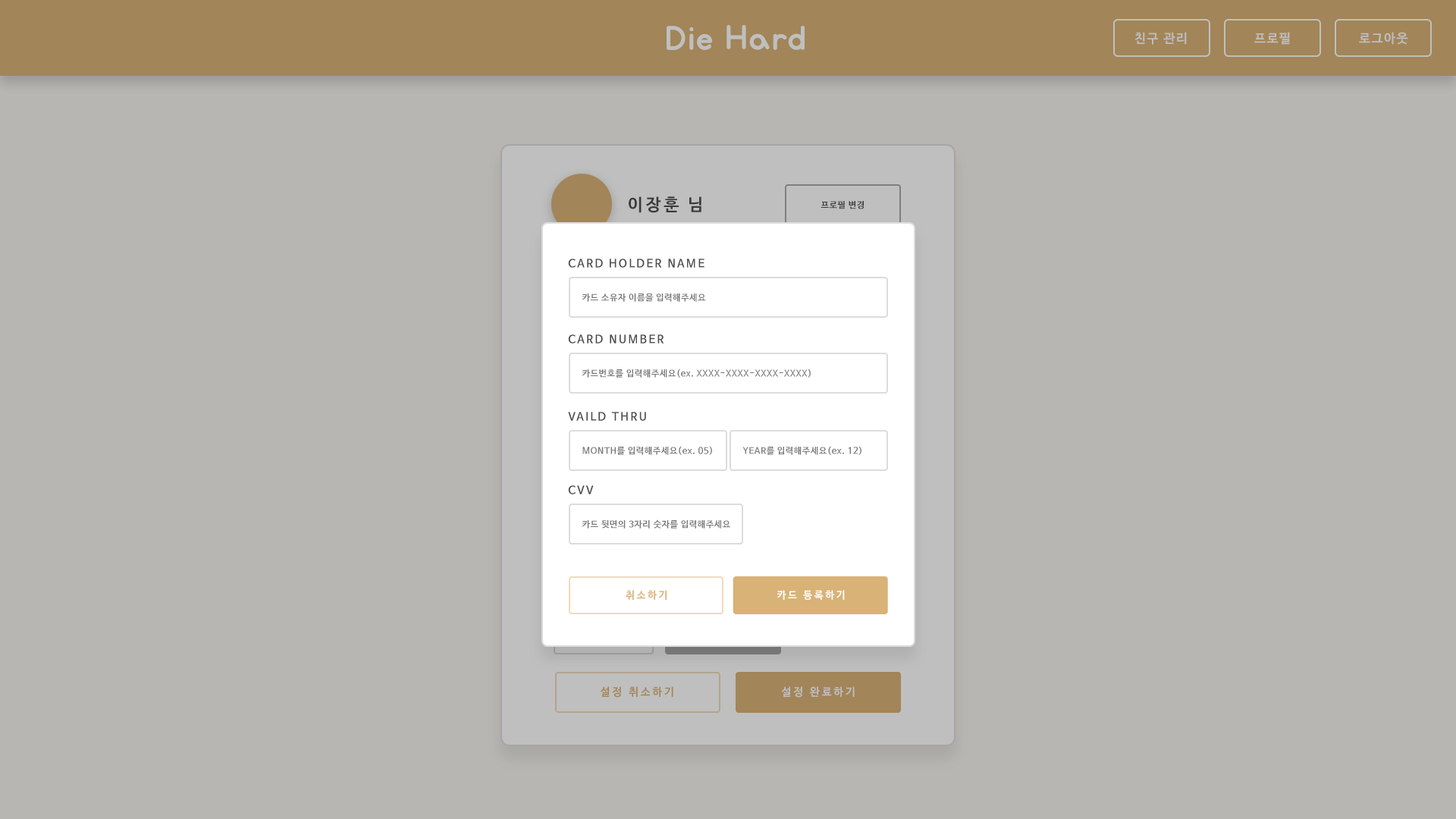
<style>
.page{position:relative;width:1456px;height:819px;background:#b8b6b2}
.page>*{position:absolute;margin:0}
.t1{font:12.6px "NanumBarunGothicBold";letter-spacing:0.1em;color:#bebebe}
.t2{font:12.6px "NanumBarunGothicBold";letter-spacing:0.1em;color:#bfbfbf}
.t3{font:17px "NanumBarunGothicBold";letter-spacing:0.16em;color:#4d4d4d}
.t4{font:8.8px "NanumBarunGothicBold";letter-spacing:0.05em;color:#4d4d4d}
.t5{font:11.1px "NanumBarunGothicBold";letter-spacing:0.16em;color:#4d4d4d}
.t6{font:8.8px "NanumBarunGothicBold";letter-spacing:0.05em;color:#787878}
.t7{font:10.2px "NanumBarunGothicBold";letter-spacing:0.2em;color:#d8b276}
.t8{font:10.2px "NanumBarunGothicBold";letter-spacing:0.2em;color:#ffffff}
.t9{font:11px "NanumBarunGothicBold";letter-spacing:0.2em;color:#a28558}
.t10{font:11px "NanumBarunGothicBold";letter-spacing:0.2em;color:#bfbfbf}
</style>
<div class="page">
<p class="t1" style="left:1134px;top:32px;width:53px;height:13px">친구 관리</p>
<p class="t2" style="left:1254px;top:32px;width:36px;height:13px">프로필</p>
<p class="t1" style="left:1359px;top:32px;width:49px;height:13px">로그아웃</p>
<p class="t3" style="left:629px;top:196px;width:72px;height:17px">이장훈 님</p>
<p class="t4" style="left:821px;top:201px;width:43px;height:8px">프로필 변경</p>
<p class="t5" style="left:568px;top:259px;width:136px;height:9px">CARD HOLDER NAME</p>
<p class="t6" style="left:582px;top:293px;width:124px;height:9px">카드 소유자 이름을 입력해주세요</p>
<p class="t5" style="left:568px;top:334px;width:96px;height:10px">CARD NUMBER</p>
<p class="t6" style="left:582px;top:369px;width:229px;height:9px">카드번호를 입력해주세요(ex. XXXX-XXXX-XXXX-XXXX)</p>
<p class="t5" style="left:568px;top:412px;width:78px;height:9px">VAILD THRU</p>
<p class="t6" style="left:582px;top:446px;width:130px;height:9px">MONTH를 입력해주세요(ex. 05)</p>
<p class="t6" style="left:742px;top:446px;width:119px;height:9px">YEAR를 입력해주세요(ex. 12)</p>
<p class="t5" style="left:568px;top:485px;width:26px;height:9px">CVV</p>
<p class="t6" style="left:582px;top:519px;width:148px;height:10px">카드 뒷면의 3자리 숫자를 입력해주세요</p>
<p class="t7" style="left:626px;top:590px;width:41px;height:10px">취소하기</p>
<p class="t8" style="left:777px;top:590px;width:68px;height:10px">카드 등록하기</p>
<p class="t9" style="left:600px;top:686px;width:73px;height:12px">설정 취소하기</p>
<p class="t10" style="left:781px;top:686px;width:74px;height:12px">설정 완료하기</p>
</div>
